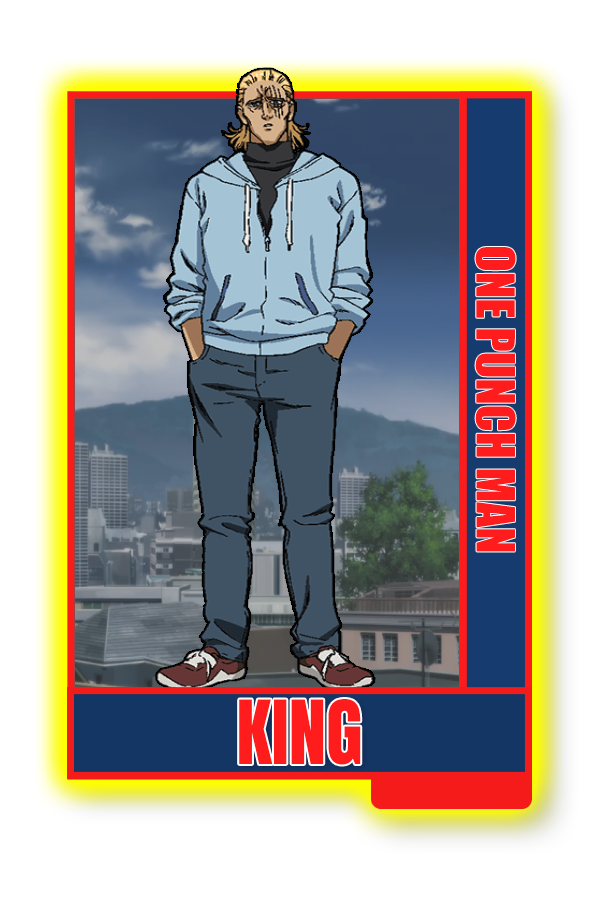
<style>
.page{position:relative;width:600px;height:900px;background:#ffffff}
.page>*{position:absolute;margin:0}
.t1{font:48.8px "Impact";color:#ff1c1c}
.t2{font:75px "Impact";color:#ff1c1c}
</style>
<div class="page">
<p class="t1" style="left:475px;top:246px;width:41px;height:306px;rotate:90deg">ONE PUNCH MAN</p>
<p class="t2" style="left:239px;top:698px;width:122px;height:67px">KING</p>
</div>
